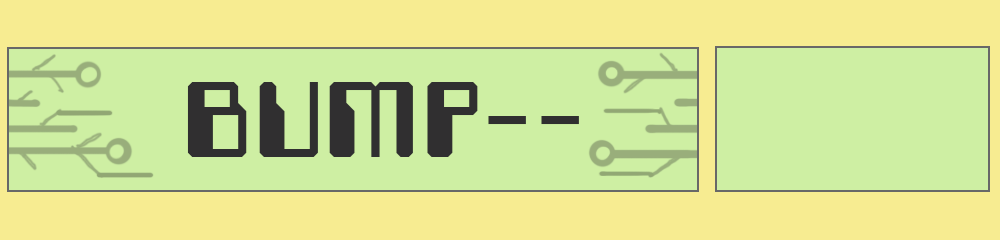
<style>
.page{position:relative;width:1000px;height:240px;background:#ceefa3}
.page>*{position:absolute;margin:0}
.t1{font:125px "Computerfont";color:#302f30}
</style>
<div class="page">
<p class="t1" style="left:187px;top:82px;width:392px;height:75px">BUMP--</p>
</div>
